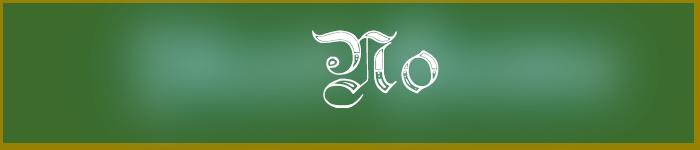
<style>
.page{position:relative;width:700px;height:150px}
.page>*{position:absolute;margin:0}
.t1{font:72px "TeutonicNo4-DemiBold";color:#ffffff}
</style>
<div class="page">
<p class="t1" style="left:312px;top:30px;width:127px;height:78px">No</p>
</div>
